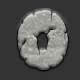
<style>
.page{position:relative;width:80px;height:80px;background:#333333}
.page>*{position:absolute;margin:0}
.t1{font:72px "JFRockSolid";color:#9e9f98}
</style>
<div class="page">
<p class="t1" style="left:17px;top:10px;width:52px;height:60px">0</p>
</div>
